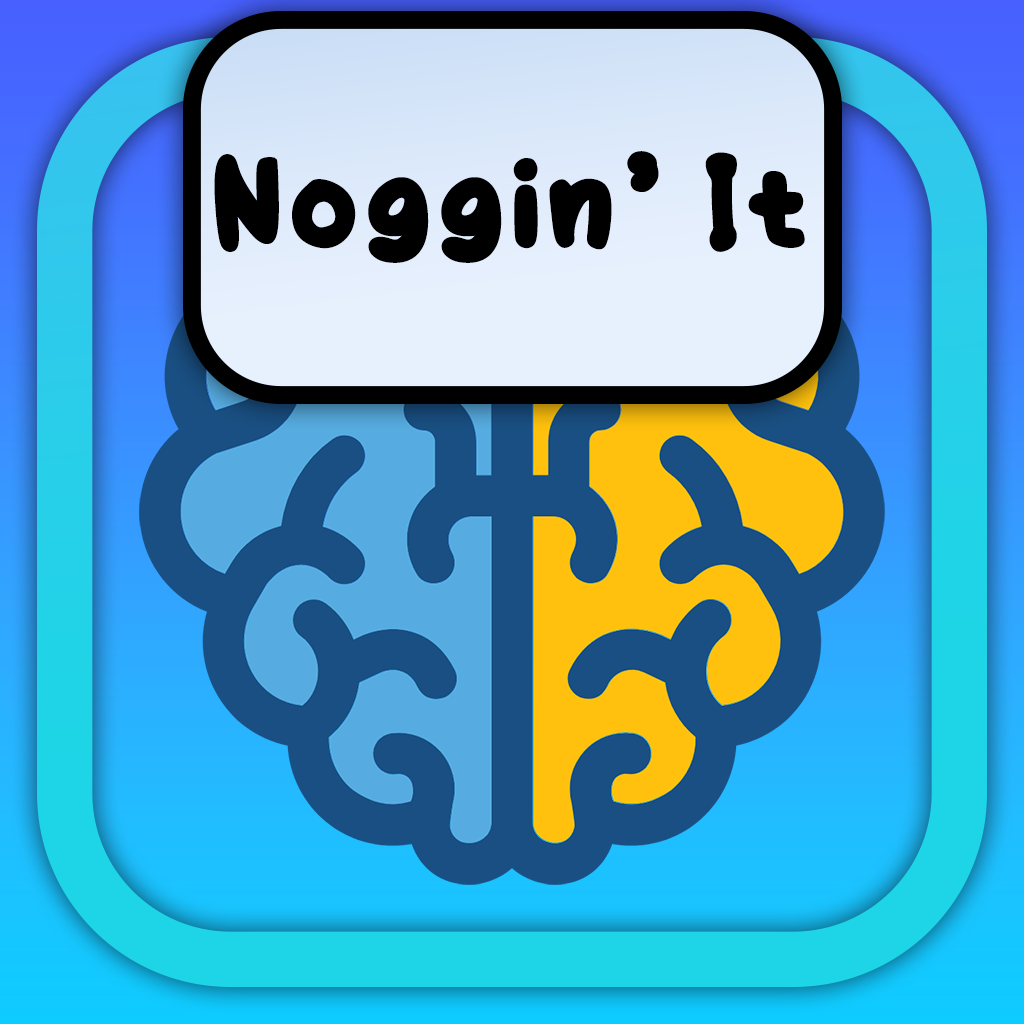
<style>
.page{position:relative;width:1024px;height:1024px}
.page>*{position:absolute;margin:0}
.t1{font:131.6px "ChibiChubby";letter-spacing:0.08em;color:#000000}
</style>
<div class="page">
<p class="t1" style="left:214px;top:151px;width:591px;height:112px">Noggin’ It</p>
</div>
